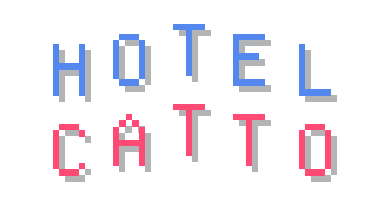
<style>
.page{position:relative;width:384px;height:200px;background:#ffffff}
.page>*{position:absolute;margin:0}
.t1{font:72px "DepartureMono-Regular";color:#5588ee}
.t2{font:72px "DepartureMono-Regular";color:#ff4a75}
</style>
<div class="page">
<p class="t1" style="left:173px;top:24px;width:32px;height:52px">T</p>
<p class="t1" style="left:113px;top:34px;width:32px;height:52px">O</p>
<p class="t1" style="left:233px;top:34px;width:32px;height:52px">E</p>
<p class="t1" style="left:53px;top:44px;width:32px;height:52px">H</p>
<p class="t1" style="left:299px;top:44px;width:32px;height:52px">L</p>
<p class="t2" style="left:173px;top:104px;width:32px;height:52px">T</p>
<p class="t2" style="left:53px;top:124px;width:32px;height:52px">C</p>
<p class="t2" style="left:113px;top:114px;width:32px;height:52px">A</p>
<p class="t2" style="left:233px;top:114px;width:32px;height:52px">T</p>
<p class="t2" style="left:299px;top:124px;width:32px;height:52px">O</p>
</div>
